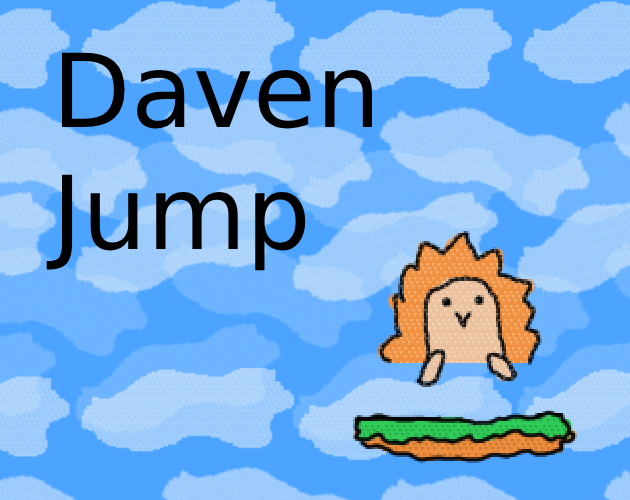
<style>
.page{position:relative;width:630px;height:500px;background:#4da4ff}
.page>*{position:absolute;margin:0}
.t1{font:102px "DejaVuSans";color:#000000}
</style>
<div class="page">
<p class="t1" style="left:46px;top:52px;width:326px;height:219px">Daven<br>Jump</p>
</div>
